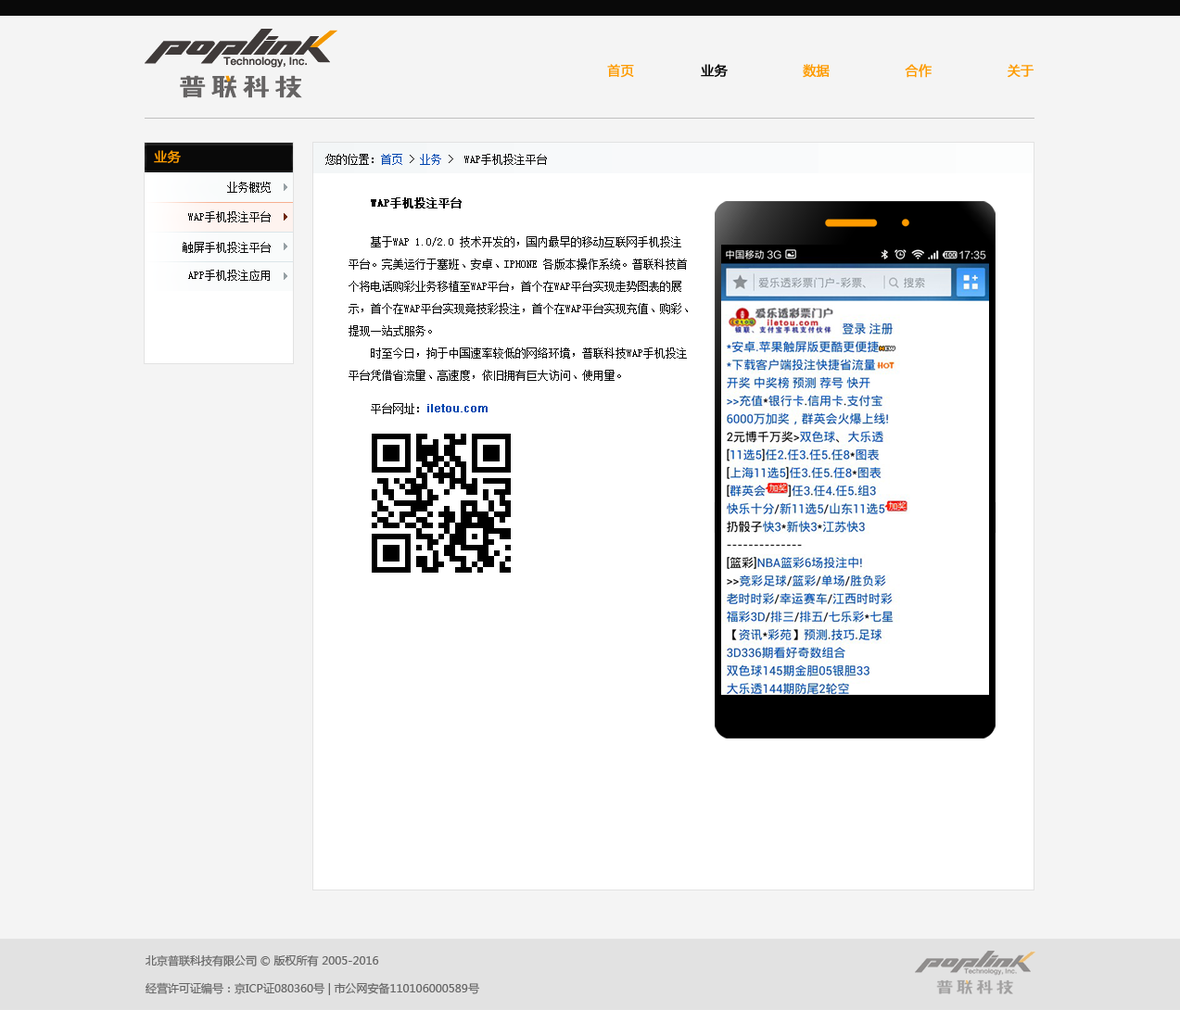
<style>
.page{position:relative;width:1180px;height:1010px;background:#f4f4f4}
.page>*{position:absolute;margin:0}
.t1{font:13px "MicrosoftYaHei";color:#fe9b00;text-transform:uppercase;font-weight:bold}
.t2{font:13px "MicrosoftYaHei";color:#090909;text-transform:uppercase;font-weight:bold}
.t3{font:13px "MicrosoftYaHei";color:#fe9b00;font-weight:bold}
.t4{font:11.1px "SimSun";color:#090909;text-transform:uppercase}
.t5{font:11.1px "SimSun";color:#0146af;text-transform:uppercase}
.t6{font:11.1px/22.2px "SimSun";color:#090909;text-transform:uppercase}
.t7{font:11.1px/16.7px "SimSun";color:#090909;text-transform:uppercase}
.t8{font:11.1px/16.7px "SimSun";color:#090909;text-transform:uppercase;font-weight:bold}
.t9{font:11.1px/16.7px "ArialMT";color:#0146af;font-weight:bold}
.t10{font:11.1px/27.8px "MicrosoftYaHei";color:#666666}
</style>
<div class="page">
<p class="t1" style="left:607px;top:64px;width:427px;height:14px">首页 <span class="t2">               业务 </span>                 数据                  合作                  关于</p>
<p class="t3" style="left:154px;top:150px;width:27px;height:13px">业务</p>
<p class="t4" style="left:325px;top:154px;width:222px;height:11px">您的位置：<span class="t5">首页 </span>&gt; <span class="t5">业务</span> &gt;  WAP手机投注平台</p>
<p class="t4" style="left:227px;top:182px;width:44px;height:11px">业务概览</p>
<p class="t6" style="left:349px;top:197px;width:339px;height:217px"><span class="t7">    </span><span class="t8">WAP手机投注平台<br><br>    </span>基于WAP 1.0/2.0 技术开发的，国内最早的移动互联网手机投注<br>平台。完美运行于塞班、安卓、iphone 各版本操作系统。普联科技首<br>个将电话购彩业务移植至WAP平台，首个在WAP平台实现走势图表的展<br>示，首个在WAP平台实现竞技彩投注，首个在WAP平台实现充值、购彩、<br>提现一站式服务。<br>    时至今日，拘于中国速率较低的网络环境，普联科技WAP手机投注<br>平台凭借省流量、高速度，依旧拥有巨大访问、使用量。<br><span class="t7"><br>    平台网址：</span><span class="t9">iletou.com</span></p>
<p class="t4" style="left:188px;top:211px;width:83px;height:11px">WAP手机投注平台</p>
<p class="t4" style="left:183px;top:242px;width:88px;height:11px">触屏手机投注平台</p>
<p class="t4" style="left:188px;top:270px;width:82px;height:11px">App手机投注应用</p>
<p class="t10" style="left:146px;top:955px;width:334px;height:41px">北京普联科技有限公司 © 版权所有 2005-2016<br>经营许可证编号：京ICP证080360号 | 市公网安备110106000589号</p>
</div>
